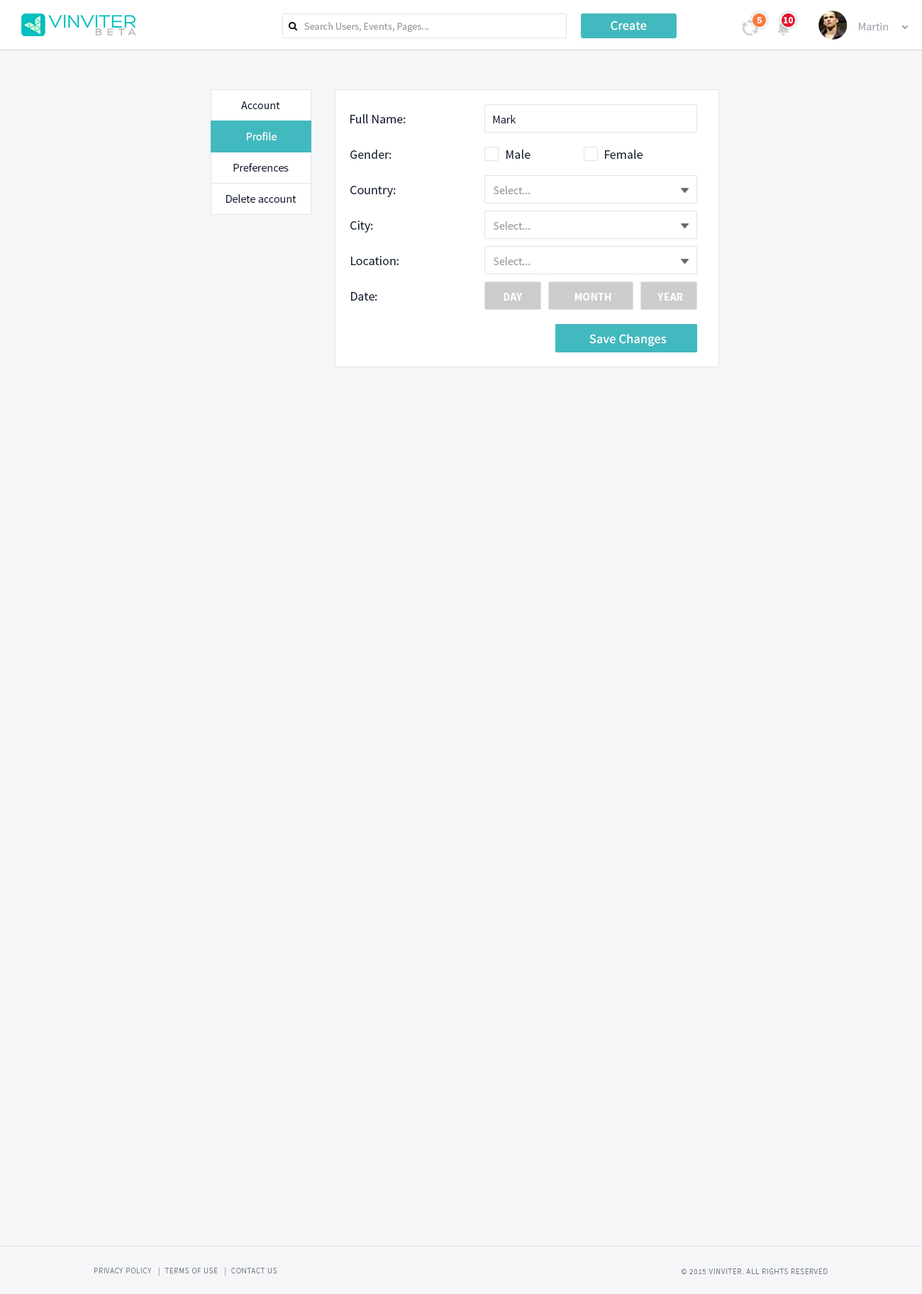
<style>
.page{position:relative;width:922px;height:1294px;background:#f5f6f7}
.page>*{position:absolute;margin:0}
.t1{font:9.2px "SourceSansPro-Bold";color:#ffffff}
.t2{font:10.2px "SourceSansPro-Regular";color:#999999}
.t3{font:12.8px "SourceSansPro-Regular";letter-spacing:0.02em;color:#ffffff}
.t4{font:11.3px "SourceSansPro-Regular";color:#a3a6ae}
.t5{font:11.3px "SourceSansPro-Regular";color:#162136}
.t6{font:12.8px "SourceSansPro-Regular";color:#162136}
.t7{font:11.3px "SourceSansPro-Regular";color:#ffffff}
.t8{font:11.3px "SourceSansPro-Regular";color:#999999}
.t9{font:11.3px "SourceSansPro-Bold";color:#ffffff}
.t10{font:7.8px "SourceSansPro-Light";letter-spacing:0.075em;color:#747a85;text-transform:uppercase}
</style>
<div class="page">
<p class="t1" style="left:756px;top:17px;width:5px;height:6px">5</p>
<p class="t1" style="left:783px;top:17px;width:10px;height:6px">10</p>
<p class="t2" style="left:304px;top:22px;width:124px;height:11px">Search Users, Events, Pages...</p>
<p class="t3" style="left:610px;top:21px;width:37px;height:9px">Create</p>
<p class="t4" style="left:859px;top:23px;width:29px;height:7px">Martin</p>
<p class="t5" style="left:241px;top:101px;width:39px;height:8px">Account</p>
<p class="t6" style="left:350px;top:114px;width:56px;height:9px">Full Name:</p>
<p class="t5" style="left:493px;top:115px;width:22px;height:8px">Mark</p>
<p class="t7" style="left:247px;top:132px;width:29px;height:8px">Profile</p>
<p class="t6" style="left:350px;top:150px;width:41px;height:9px">Gender:</p>
<p class="t6" style="left:506px;top:150px;width:24px;height:9px">Male</p>
<p class="t6" style="left:605px;top:150px;width:37px;height:9px">Female</p>
<p class="t5" style="left:233px;top:163px;width:56px;height:9px">Preferences</p>
<p class="t6" style="left:350px;top:186px;width:46px;height:11px">Country:</p>
<p class="t8" style="left:493px;top:186px;width:37px;height:8px">Select...</p>
<p class="t5" style="left:226px;top:194px;width:70px;height:9px">Delete account</p>
<p class="t6" style="left:350px;top:220px;width:23px;height:13px">City:</p>
<p class="t8" style="left:493px;top:221px;width:37px;height:9px">Select...</p>
<p class="t6" style="left:351px;top:256px;width:47px;height:9px">Location:</p>
<p class="t8" style="left:493px;top:257px;width:37px;height:8px">Select...</p>
<p class="t6" style="left:351px;top:292px;width:26px;height:9px">Date:</p>
<p class="t9" style="left:503px;top:293px;width:19px;height:8px">DAY</p>
<p class="t9" style="left:574px;top:293px;width:37px;height:8px">MONTH</p>
<p class="t9" style="left:657px;top:293px;width:26px;height:8px">YEAR</p>
<p class="t3" style="left:589px;top:334px;width:77px;height:12px">Save Changes</p>
<p class="t10" style="left:94px;top:1267px;width:183px;height:8px">Privacy Policy   |  Terms of Use   |  Contact us</p>
<p class="t10" style="left:681px;top:1268px;width:146px;height:6px">© 2015 VINVITER. All rights reserved</p>
</div>
